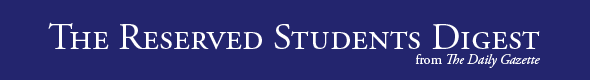
<style>
.page{position:relative;width:590px;height:80px;background:#23256e}
.page>*{position:absolute;margin:0}
.t1{font:37.6px "AGaramondPro-Regular";color:#ffffff;font-variant:small-caps}
.t2{font:14px "AGaramondPro-Italic";color:#ffffff}
.t3{font:14px "AGaramondPro-Regular";color:#ffffff}
</style>
<div class="page">
<p class="t1" style="left:48px;top:22px;width:492px;height:28px">The Reserved Students Digest</p>
<p class="t2" style="left:415px;top:54px;width:125px;height:14px"><span class="t3">from </span>The Daily Gazette</p>
</div>
